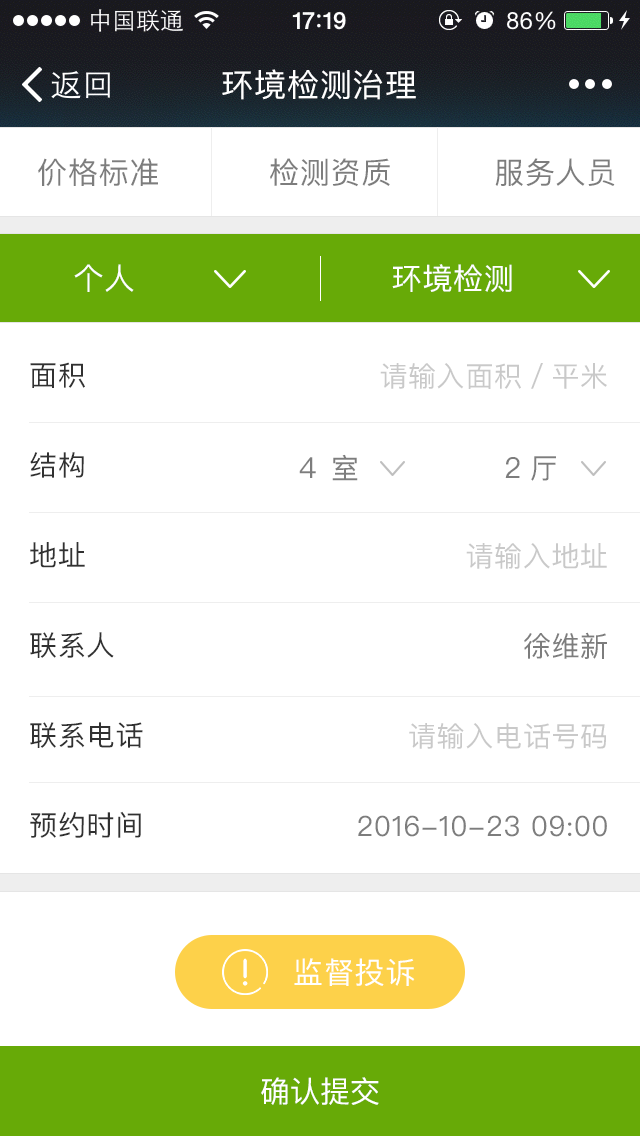
<style>
.page{position:relative;width:640px;height:1136px;background:#ffffff}
.page>*{position:absolute;margin:0}
.t1{font:32px "PingFangSC-Regular";letter-spacing:0.025em;color:#ffffff}
.t2{font:30px "PingFangSC-Regular";letter-spacing:0.025em;color:#7d7d7d}
.t3{font:30px "PingFangSC-Regular";letter-spacing:0.025em;color:#ffffff}
.t4{font:28px/90px "PingFangSC-Regular";letter-spacing:0.025em;color:#313131}
.t5{font:28px/90px "PingFangSC-Regular";letter-spacing:0.025em;color:#7d7d7d}
.t6{font:28px/90px "PingFangSC-Regular";letter-spacing:0.025em;color:#c9c9c9}
.t7{font:29px "PingFangSC-Regular";letter-spacing:0.025em;color:#7d7d7d}
.t8{font:28px "PingFangSC-Regular";letter-spacing:0.025em;color:#7d7d7d}
.t9{font:30px "PingFangSC-Regular";color:#ffffff}
</style>
<div class="page">
<p class="t1" style="left:222px;top:69px;width:194px;height:31px">环境检测治理</p>
<p class="t2" style="left:38px;top:158px;width:120px;height:28px">价格标准</p>
<p class="t2" style="left:270px;top:158px;width:120px;height:29px">检测资质</p>
<p class="t2" style="left:495px;top:158px;width:120px;height:28px">服务人员</p>
<p class="t3" style="left:74px;top:264px;width:60px;height:28px">个人</p>
<p class="t3" style="left:392px;top:264px;width:120px;height:28px">环境检测</p>
<p class="t4" style="left:30px;top:362px;width:113px;height:476px">面积<br>结构<br>地址<br>联系人<br>联系电话<br>预约时间</p>
<p class="t5" style="left:358px;top:363px;width:249px;height:474px;text-align:right"><span class="t6">请输入面积／平米<br><br>请输入地址<br></span>徐维新<br><span class="t6">请输入电话号码<br></span>2016-10-23 09:00</p>
<p class="t7" style="left:299px;top:457px;width:221px;height:21px">4                  2</p>
<p class="t8" style="left:332px;top:454px;width:224px;height:27px">室                 厅</p>
<p class="t3" style="left:294px;top:958px;width:121px;height:28px">监督投诉</p>
<p class="t9" style="left:261px;top:1077px;width:118px;height:28px">确认提交</p>
</div>
